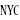
<style>
.page{position:relative;width:20px;height:20px;background:#ffffff}
.page>*{position:absolute;margin:0}
.t1{font:16px "NuevaStd-Cond";color:#000000}
</style>
<div class="page">
<p class="t1" style="left:0px;top:5px;width:19px;height:10px">NYC</p>
</div>
